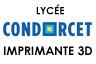
<style>
.page{position:relative;width:96px;height:64px;background:#ffffff}
.page>*{position:absolute;margin:0}
.t1{font:10px "CenturyGothic-Bold";color:#000000}
.t2{font:12px "CenturyGothic-Bold";color:#000000}
</style>
<div class="page">
<p class="t1" style="left:36px;top:4px;width:28px;height:11px">LYCÉE</p>
<p class="t2" style="left:4px;top:46px;width:88px;height:10px">IMPRIMANTE 3D</p>
</div>
